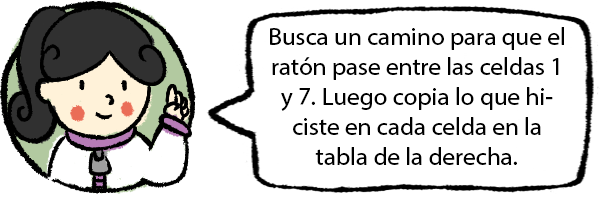
<style>
.page{position:relative;width:600px;height:200px;background:#ffffff}
.page>*{position:absolute;margin:0}
.t1{font:25px "MyriadHebrew-Regular";color:#000000}
</style>
<div class="page">
<p class="t1" style="left:270px;top:27px;width:294px;height:138px;text-align:center">Busca un camino para que el ratón pase entre las celdas 1 y 7. Luego copia lo que hiciste en cada celda en la tabla de la derecha.</p>
</div>
